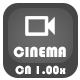
<style>
.page{position:relative;width:80px;height:80px;background:#464646}
.page>*{position:absolute;margin:0}
.t1{font:15px "Bauhaus93";color:#ffffff}
.t2{font:12px "Bauhaus93";color:#ffffff}
</style>
<div class="page">
<p class="t1" style="left:13px;top:46px;width:53px;height:12px">CINEMA</p>
<p class="t2" style="left:15px;top:65px;width:51px;height:10px">CN 1.00x</p>
</div>
